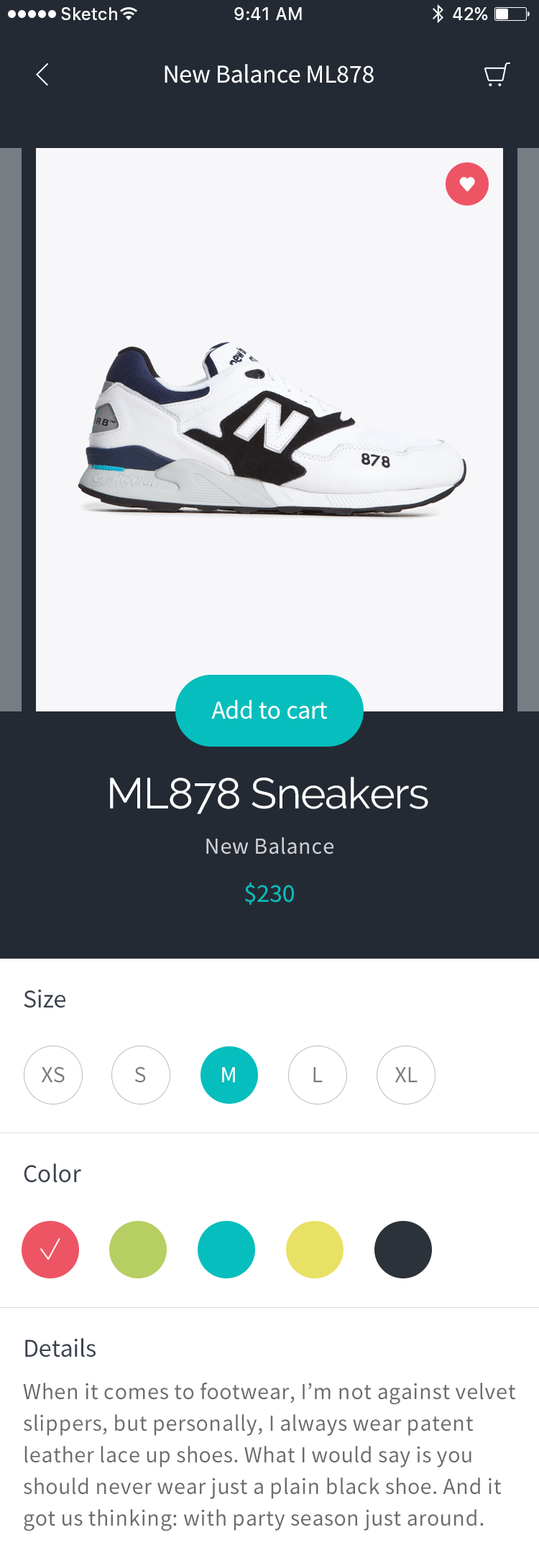
<style>
.page{position:relative;width:539px;height:1568px;background:#ffffff}
.page>*{position:absolute;margin:0}
.t1{font:17.2px "SFUIText-Medium";color:#ffffff}
.t2{font:25.9px "SourceSansPro-Regular";letter-spacing:-0.005em;color:#ffffff}
.t3{font:43.1px "Raleway";letter-spacing:-0.02em;color:#ffffff}
.t4{font:23px "SourceSansPro-Regular";letter-spacing:0.02em;color:#cfcfd1}
.t5{font:25.9px "SourceSansPro-Regular";letter-spacing:-0.005em;color:#06bebd}
.t6{font:25.9px "SourceSansPro-Regular";letter-spacing:-0.005em;color:#3c4350}
.t7{font:23px "SourceSansPro-Regular";letter-spacing:0.02em;color:#7a7c7d}
.t8{font:23px "SourceSansPro-Regular";letter-spacing:0.02em;color:#ffffff}
.t9{font:23px/31.6px "SourceSansPro-Regular";letter-spacing:0.02em;color:#696d6f}
</style>
<div class="page">
<p class="t1" style="left:61px;top:7px;width:56px;height:13px">Sketch</p>
<p class="t1" style="left:234px;top:7px;width:68px;height:13px">9:41 AM</p>
<p class="t1" style="left:453px;top:7px;width:35px;height:13px">42%</p>
<p class="t2" style="left:165px;top:64px;width:209px;height:19px">New Balance ML878</p>
<p class="t2" style="left:211px;top:700px;width:117px;height:19px">Add to cart</p>
<p class="t3" style="left:110px;top:777px;width:318px;height:37px">ML878 Sneakers</p>
<p class="t4" style="left:206px;top:837px;width:127px;height:17px">New Balance</p>
<p class="t5" style="left:245px;top:882px;width:49px;height:23px">$230</p>
<p class="t6" style="left:24px;top:990px;width:41px;height:18px">Size</p>
<p class="t7" style="left:41px;top:1066px;width:24px;height:17px">XS</p>
<p class="t7" style="left:134px;top:1066px;width:12px;height:17px">S</p>
<p class="t8" style="left:222px;top:1067px;width:13px;height:15px">M</p>
<p class="t7" style="left:313px;top:1067px;width:10px;height:15px">L</p>
<p class="t7" style="left:395px;top:1067px;width:23px;height:15px">XL</p>
<p class="t6" style="left:24px;top:1163px;width:57px;height:20px">Color</p>
<p class="t6" style="left:25px;top:1338px;width:71px;height:19px">Details</p>
<p class="t9" style="left:23px;top:1383px;width:493px;height:148px">When it comes to footwear, I’m not against velvet<br>slippers, but personally, I always wear patent<br>leather lace up shoes. What I would say is you<br>should never wear just a plain black shoe. And it<br>got us thinking: with party season just around.</p>
</div>
